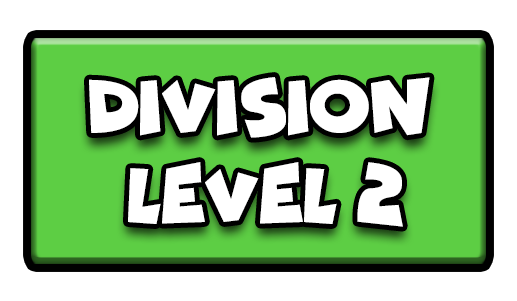
<style>
.page{position:relative;width:517px;height:301px;background:#ffffff}
.page>*{position:absolute;margin:0}
.t1{font:77.7px "Funhouse";color:#ffffff;scale:0.95 1}
</style>
<div class="page">
<p class="t1" style="left:89px;top:77px;width:341px;height:61px">DIVISION</p>
<p class="t1" style="left:128px;top:162px;width:275px;height:65px">LEVEL 2</p>
</div>
